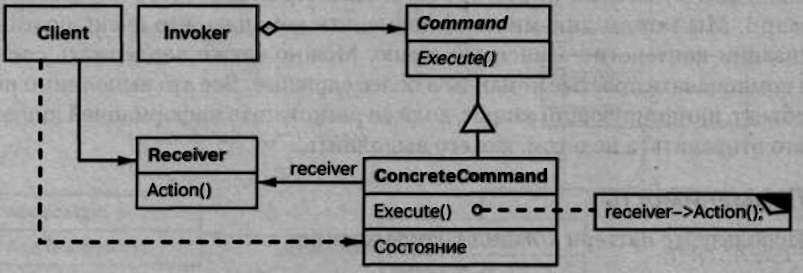
<style>
.page{position:relative;width:803px;height:273px}
.page>*{position:absolute;margin:0}
.t1{font:18px "OpenSans-SemiboldItalic";color:#000000;scale:1.07 1}
.t2{font:18px "OpenSans";color:#000000;scale:1.07 1}
.t3{font:18px "OpenSans";color:#000000;scale:1.04 1}
.t4{font:18px "OpenSans-Italic";color:#000000;scale:1.1 1}
.t5{font:18px "OpenSans";color:#000000;scale:1.1 1}
.t6{font:18px "OpenSans";color:#000000}
.t7{font:18px "OpenSans-Bold";color:#000000}
</style>
<div class="page">
<p class="t1" style="left:418px;top:15px;width:91px;height:15px">Command</p>
<p class="t2" style="left:39px;top:25px;width:50px;height:15px">Client</p>
<p class="t3" style="left:165px;top:25px;width:64px;height:15px">Invoker</p>
<p class="t4" style="left:418px;top:51px;width:77px;height:16px">Execute()</p>
<p class="t5" style="left:150px;top:147px;width:76px;height:15px">Receiver</p>
<p class="t6" style="left:291px;top:161px;width:67px;height:15px">receiver</p>
<p class="t7" style="left:376px;top:168px;width:171px;height:14px">ConcreteCommand</p>
<p class="t6" style="left:147px;top:182px;width:63px;height:17px">Action()</p>
<p class="t6" style="left:375px;top:204px;width:76px;height:16px">Execute()</p>
<p class="t6" style="left:606px;top:204px;width:156px;height:17px">receiver–&gt;Action();</p>
<p class="t6" style="left:375px;top:240px;width:92px;height:13px">Состояние</p>
</div>
